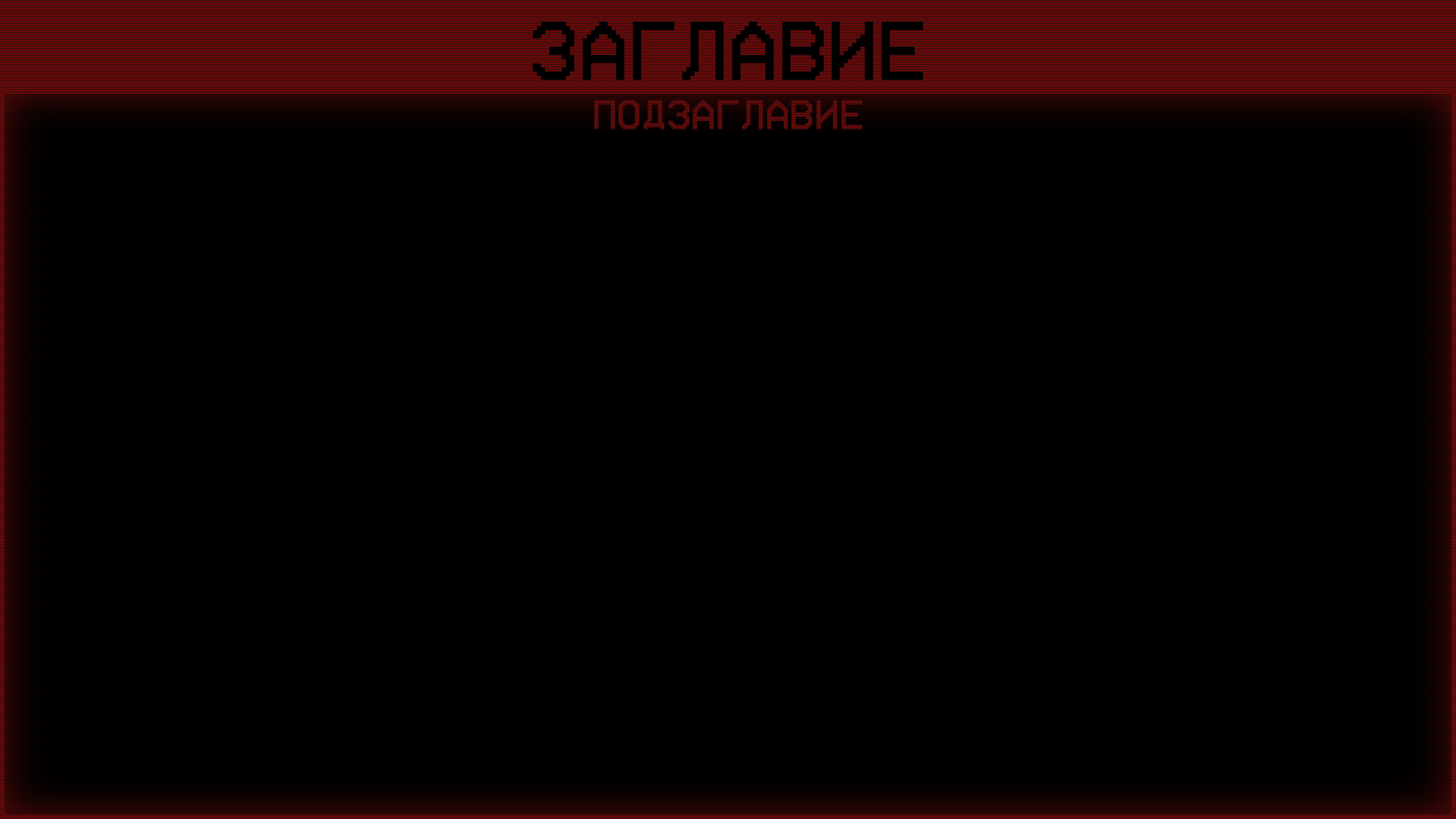
<style>
.page{position:relative;width:1456px;height:819px;background:#000000}
.page>*{position:absolute;margin:0}
.t1{font:66.4px "VCROSDMonoRUSbyD";color:#000000}
.t2{font:32.9px "VCROSDMonoRUSbyD";color:#600b0b}
</style>
<div class="page">
<p class="t1" style="left:532px;top:21px;width:392px;height:59px">ЗАГЛАВИЕ</p>
<p class="t2" style="left:594px;top:100px;width:268px;height:30px">ПОДЗАГЛАВИЕ</p>
</div>
